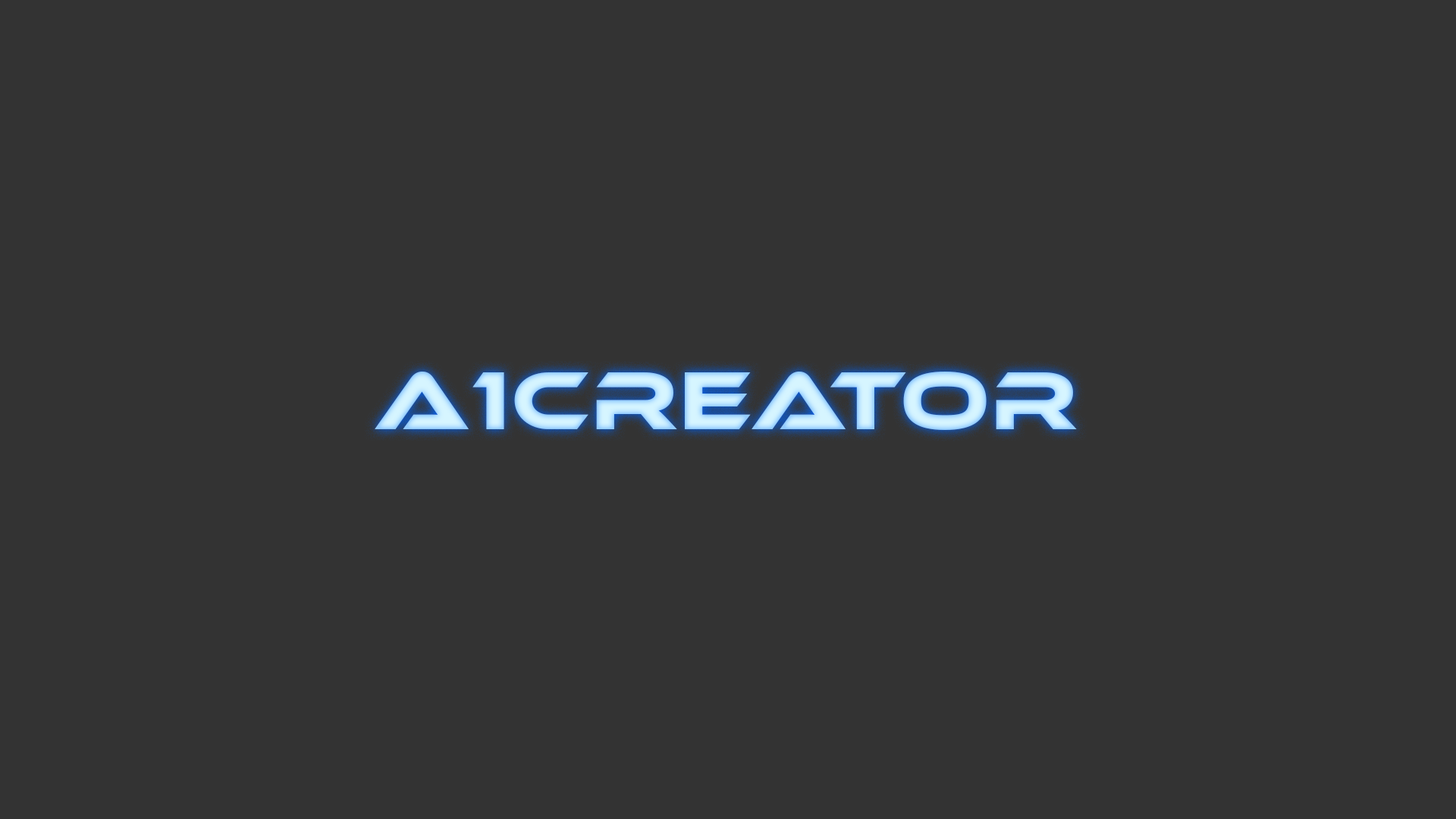
<style>
.page{position:relative;width:1456px;height:819px;background:#333333}
.page>*{position:absolute;margin:0}
.t1{font:85.3px "EthnocentricRg-Regular";letter-spacing:0.025em;color:#c6ebff}
</style>
<div class="page">
<p class="t1" style="left:375px;top:372px;width:702px;height:58px">a1creator</p>
</div>
